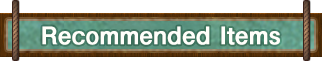
<style>
.page{position:relative;width:322px;height:61px;background:#ffffff}
.page>*{position:absolute;margin:0}
.t1{font:24px "FutoGoB101Pr5-Bold";color:#fffffa;font-weight:bold}
</style>
<div class="page">
<p class="t1" style="left:42px;top:26px;width:238px;height:19px">Recommended Items</p>
</div>
